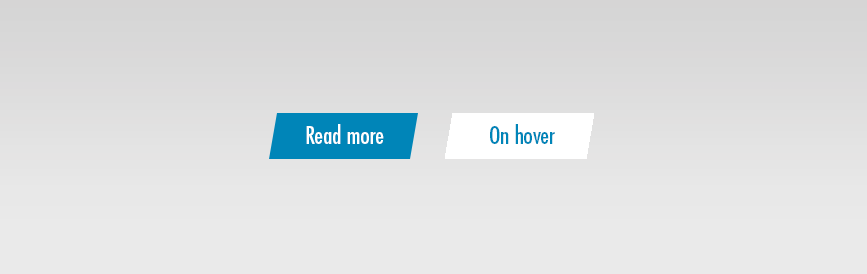
<style>
.page{position:relative;width:867px;height:274px;background:#eaeaea}
.page>*{position:absolute;margin:0}
.t1{font:24px "FuturaStd-Condensed";color:#ffffff}
.t2{font:24px "FuturaStd-Condensed";color:#0085b8}
</style>
<div class="page">
<p class="t1" style="left:306px;top:124px;width:78px;height:20px">Read more</p>
<p class="t2" style="left:490px;top:124px;width:65px;height:20px">On hover</p>
</div>
